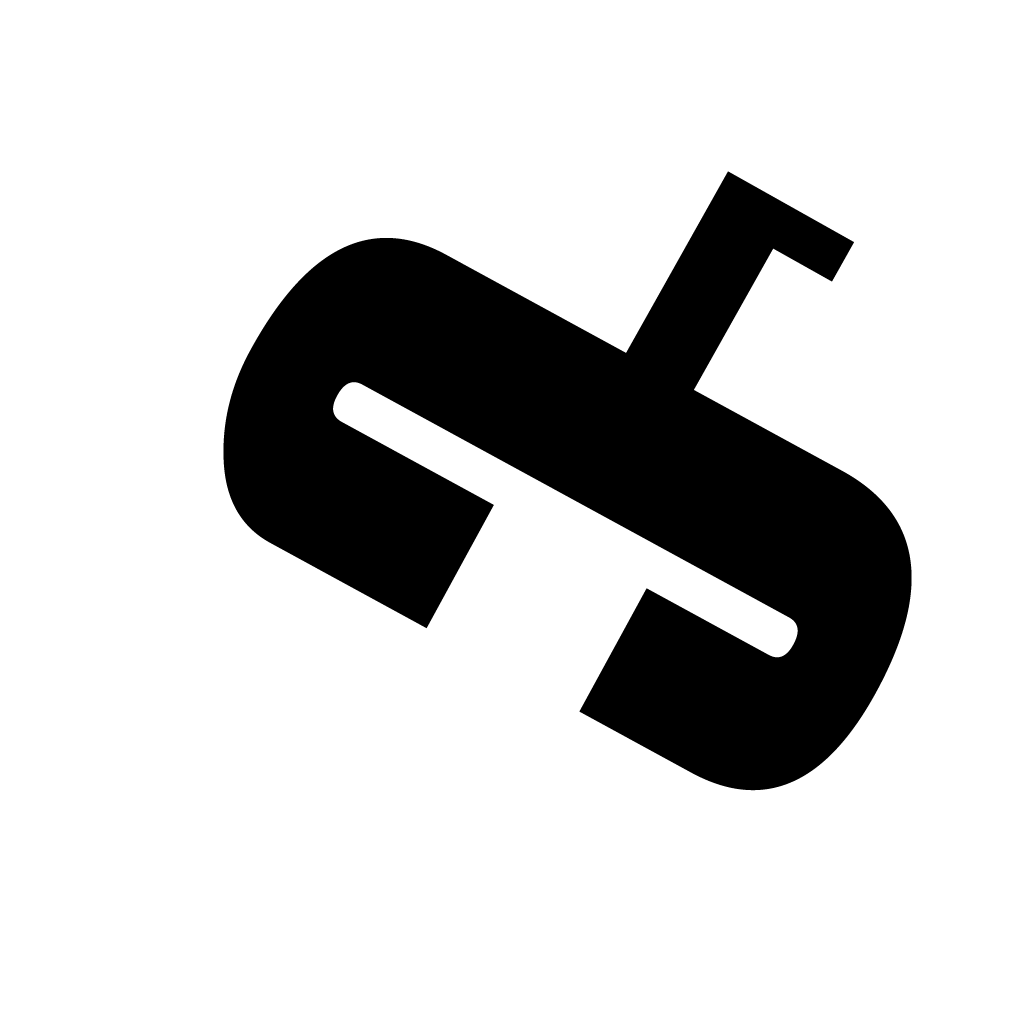
<style>
.page{position:relative;width:1024px;height:1024px;background:#ffffff}
.page>*{position:absolute;margin:0}
.t1{font:500px "Haettenschweiler";color:#000000}
.t2{font:1000px "Haettenschweiler";color:#000000}
</style>
<div class="page">
<p class="t1" style="left:556px;top:171px;width:298px;height:344px;rotate:29deg">L</p>
<p class="t2" style="left:223px;top:238px;width:689px;height:553px;rotate:119deg">C</p>
</div>
